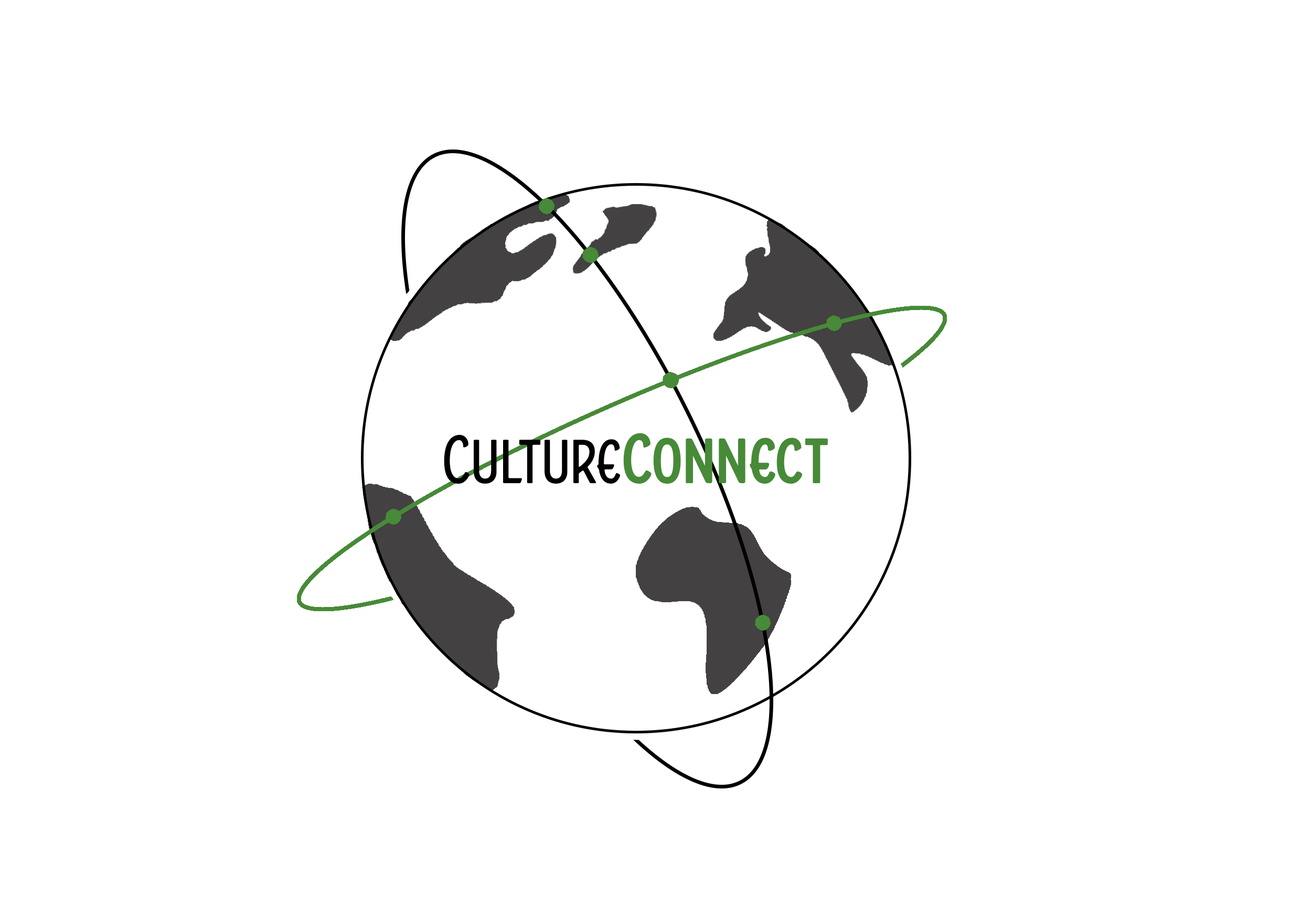
<style>
.page{position:relative;width:1301px;height:917px;background:#ffffff}
.page>*{position:absolute;margin:0}
.t1{font:63.4px "BoucherieSans";color:#000000}
.t2{font:65.6px "BoucherieSans-Bold";color:#478a38}
</style>
<div class="page">
<p class="t1" style="left:444px;top:433px;width:384px;height:51px">Culture<span class="t2">Connect</span></p>
</div>
